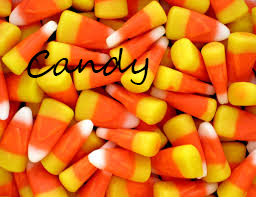
<style>
.page{position:relative;width:256px;height:197px}
.page>*{position:absolute;margin:0}
.t1{font:36px "SegoeScript";color:#000000}
</style>
<div class="page">
<p class="t1" style="left:27px;top:48px;width:122px;height:37px">Candy</p>
</div>
